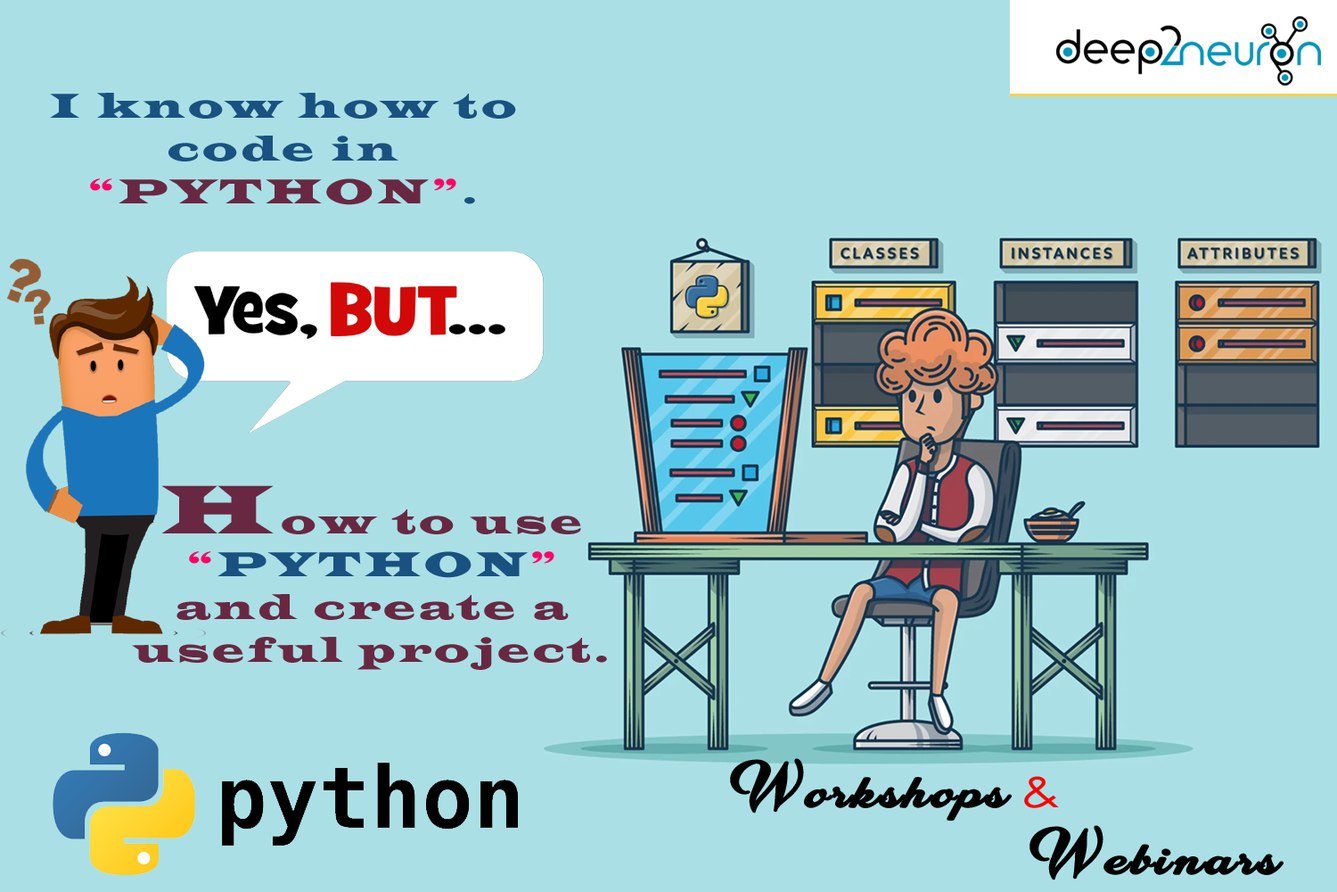
<style>
.page{position:relative;width:1337px;height:892px;background:#aae0e5}
.page>*{position:absolute;margin:0}
.t1{font:35.7px "LatinWide";letter-spacing:0.1em;color:#195181}
.t2{font:35.7px "LatinWide";letter-spacing:0.1em;color:#ff0066}
.t3{font:35.7px "LatinWide";letter-spacing:0.1em;color:#692842}
.t4{font:71.3px "LatinWide";letter-spacing:0.1em;color:#692842}
.t5{font:44.6px "CinderelaPersonalUse-Regular";letter-spacing:0.08em;color:#000000;scale:1.2 1}
.t6{font:44.6px "CenturyGothic";letter-spacing:0.08em;color:#ff0000;scale:1.2 1}
</style>
<div class="page">
<p class="t1" style="left:50px;top:93px;width:466px;height:112px;text-align:center">I know how to code in <br><span class="t2">“</span><span class="t3">PYTHON</span><span class="t2">”</span>.</p>
<p class="t3" style="left:132px;top:485px;width:475px;height:185px;text-align:center"><span class="t4">H</span>ow to use <br><span class="t2">“</span><span class="t1">PYTHON</span><span class="t2">”</span> <br>and create a useful project.</p>
<p class="t5" style="left:730px;top:758px;width:282px;height:63px">Workshops</p>
<p class="t6" style="left:1024px;top:776px;width:35px;height:32px">&amp;</p>
<p class="t5" style="left:1030px;top:825px;width:254px;height:55px">Webinars</p>
</div>
